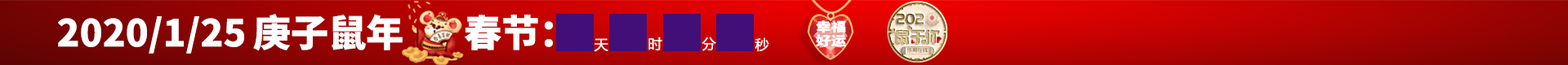
<style>
.page{position:relative;width:1568px;height:65px}
.page>*{position:absolute;margin:0}
.t1{font:37.3px "SourceHanSansCN-Heavy";color:#ffffff}
.t2{font:15.9px "PangMenZhengDao";text-transform:uppercase;scale:0.86 1}
.t3{font:12.6px/14.1px "SourceHanSansCN-Heavy";color:#ffffff;scale:1.2 1}
.t4{font:19.6px "PangMenZhengDao";text-transform:uppercase;scale:0.82 1}
.t5{font:13.9px "MicrosoftYaHei";color:#ffffff}
.t6{font:6.2px "PangMenZhengDao";color:#998457;text-transform:uppercase;scale:0.9 1}
</style>
<div class="page">
<p class="t1" style="left:58px;top:14px;width:495px;height:40px">2020/1/25 庚子鼠年       春节：</p>
<p class="t2" style="left:897px;top:13px;width:36px;height:11px">2020</p>
<p class="t3" style="left:816px;top:20px;width:30px;height:27px;text-align:center">幸福<br>好运</p>
<p class="t4" style="left:896px;top:29px;width:44px;height:15px">鼠于你</p>
<p class="t5" style="left:594px;top:38px;width:14px;height:14px">天</p>
<p class="t5" style="left:648px;top:37px;width:14px;height:14px">时</p>
<p class="t5" style="left:702px;top:37px;width:14px;height:14px">分</p>
<p class="t5" style="left:755px;top:38px;width:14px;height:14px">秒</p>
<p class="t6" style="left:907px;top:48px;width:21px;height:5px">乐哥在线</p>
</div>
